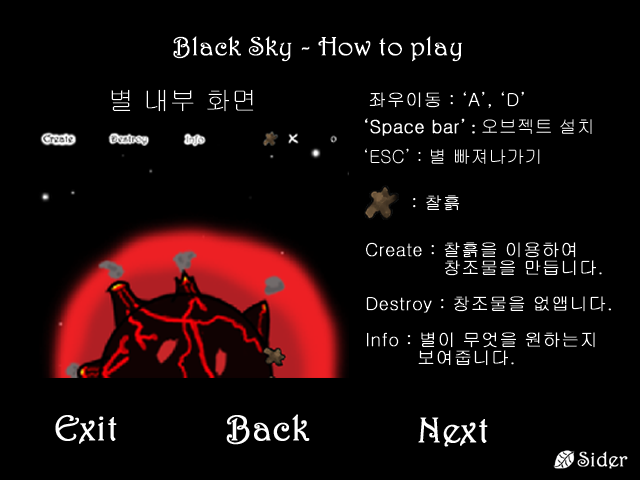
<style>
.page{position:relative;width:640px;height:480px;background:#000000}
.page>*{position:absolute;margin:0}
.t1{font:26.4px "Gulim";color:#ffffff;font-weight:bold}
.t2{font:18px "Gulim";color:#ffffff;font-weight:bold}
.t3{font:18px/30px "Gulim";color:#ffffff;font-weight:bold}
.t4{font:18px/30px "Harrington";color:#ffffff;font-weight:bold}
.t5{font:36px "Harrington";color:#ffffff;font-weight:bold}
</style>
<div class="page">
<p class="t1" style="left:111px;top:89px;width:143px;height:23px">별 내부 화면</p>
<p class="t2" style="left:369px;top:91px;width:155px;height:18px">좌우이동 : ‘A’, ‘D’</p>
<p class="t3" style="left:365px;top:118px;width:227px;height:46px">‘Space bar’<span class="t4"> : </span>오브젝트 설치<br>‘ESC’ : 별 빠져나가기</p>
<p class="t2" style="left:413px;top:195px;width:47px;height:16px">: 찰흙</p>
<p class="t2" style="left:366px;top:242px;width:245px;height:124px">Create : 찰흙을 이용하여<br>            창조물을 만듭니다.<br><br>Destroy : 창조물을 없앱니다.<br><br>Info : 별이 무엇을 원하는지<br>        보여줍니다.</p>
<p class="t5" style="left:226px;top:414px;width:84px;height:31px">Back</p>
<p class="t5" style="left:418px;top:417px;width:70px;height:30px">Next</p>
</div>
